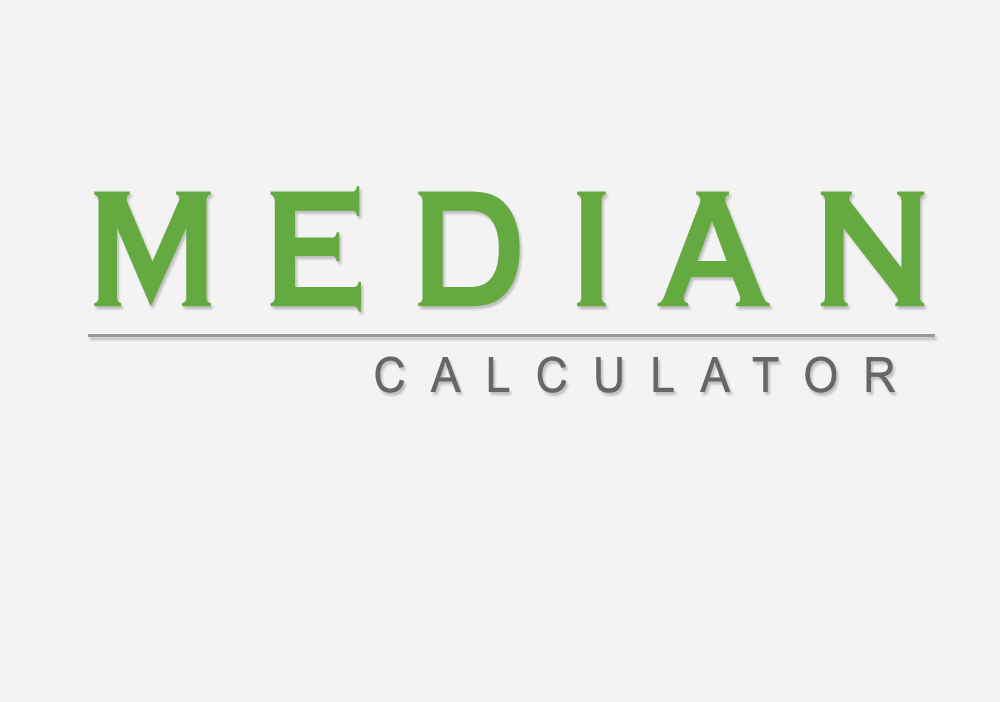
<style>
.page{position:relative;width:1000px;height:702px;background:#f3f3f3}
.page>*{position:absolute;margin:0}
.t1{font:171.7px "CopperplateGothic-Bold";letter-spacing:0.315em;color:#65aa40;scale:0.8 1}
.t2{font:48.6px "ArialMT";letter-spacing:0.555em;color:#666666;scale:0.92 1}
</style>
<div class="page">
<p class="t1" style="left:94px;top:186px;width:831px;height:126px">MEDIAN</p>
<p class="t2" style="left:375px;top:356px;width:521px;height:37px">CALCULATOR</p>
</div>
